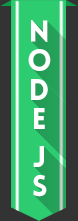
<style>
.page{position:relative;width:78px;height:221px;background:#333333}
.page>*{position:absolute;margin:0}
.t1{font:29.3px "LoveloBlack";color:#ffffff}
</style>
<div class="page">
<p class="t1" style="left:28px;top:20px;width:23px;height:177px;text-align:center">node js</p>
</div>
